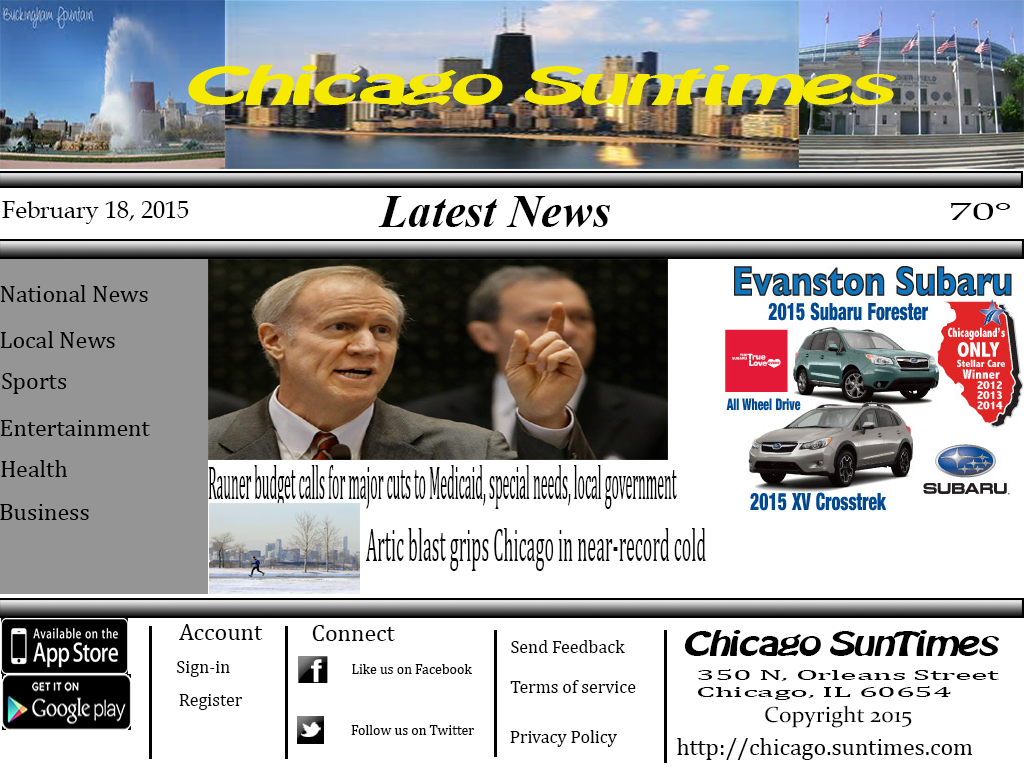
<style>
.page{position:relative;width:1024px;height:768px;background:#ffffff}
.page>*{position:absolute;margin:0}
.t1{font:46.6px "TimesNewRomanPS-BoldItalicMT";color:#000000}
.t2{font:24px "BookAntiqua";color:#000000}
.t3{font:24.2px "BookAntiqua";color:#000000;scale:1.86 1}
.t4{font:24px "Cambria";color:#000000}
.t5{font:48px "Cambria";color:#050505;scale:0.29 1}
.t6{font:46.7px "Cambria";color:#050505;scale:0.39 1}
.t7{font:24px "Cambria";color:#050505}
.t8{font:30px "Batavia";color:#000000}
.t9{font:18px "Cambria";color:#000000}
.t10{font:18px "Cambria";color:#050505}
.t11{font:14px "Cambria";color:#050505}
.t12{font:13.6px "Cambria";color:#000000;scale:2.47 1}
.t13{font:21.9px "Constantia";color:#000000;scale:1.06 1}
</style>
<div class="page">
<p class="t1" style="left:378px;top:196px;width:232px;height:31px">Latest News</p>
<p class="t2" style="left:2px;top:201px;width:187px;height:23px">February 18, 2015</p>
<p class="t3" style="left:951px;top:203px;width:60px;height:17px">70°</p>
<p class="t4" style="left:0px;top:285px;width:148px;height:17px">National News</p>
<p class="t4" style="left:0px;top:331px;width:115px;height:17px">Local News</p>
<p class="t4" style="left:2px;top:373px;width:65px;height:21px">Sports</p>
<p class="t4" style="left:0px;top:420px;width:150px;height:16px">Entertainment</p>
<p class="t4" style="left:1px;top:460px;width:66px;height:17px">Health</p>
<p class="t5" style="left:208px;top:465px;width:469px;height:44px">Rauner budget calls for major cuts to Medicaid, special needs, local government</p>
<p class="t4" style="left:0px;top:504px;width:89px;height:16px">Business</p>
<p class="t6" style="left:365px;top:528px;width:341px;height:43px">Artic blast grips Chicago in near-record cold</p>
<p class="t7" style="left:179px;top:624px;width:84px;height:16px">Account</p>
<p class="t7" style="left:312px;top:625px;width:83px;height:16px">Connect</p>
<p class="t8" style="left:684px;top:630px;width:316px;height:26px">Chicago SunTimes</p>
<p class="t9" style="left:511px;top:640px;width:114px;height:13px">Send Feedback</p>
<p class="t10" style="left:177px;top:661px;width:53px;height:16px">Sign-in</p>
<p class="t11" style="left:352px;top:664px;width:120px;height:10px">Like us on Facebook</p>
<p class="t12" style="left:698px;top:669px;width:301px;height:31px">350 N, Orleans Street<br>Chicago, IL 60654</p>
<p class="t9" style="left:510px;top:680px;width:126px;height:13px">Terms of service</p>
<p class="t10" style="left:179px;top:694px;width:63px;height:16px">Register</p>
<p class="t13" style="left:765px;top:705px;width:147px;height:23px">Copyright 2015</p>
<p class="t11" style="left:351px;top:725px;width:123px;height:10px">Follow us on Twitter</p>
<p class="t9" style="left:510px;top:730px;width:107px;height:17px">Privacy Policy</p>
<p class="t4" style="left:677px;top:738px;width:296px;height:22px">http://chicago.suntimes.com</p>
</div>
